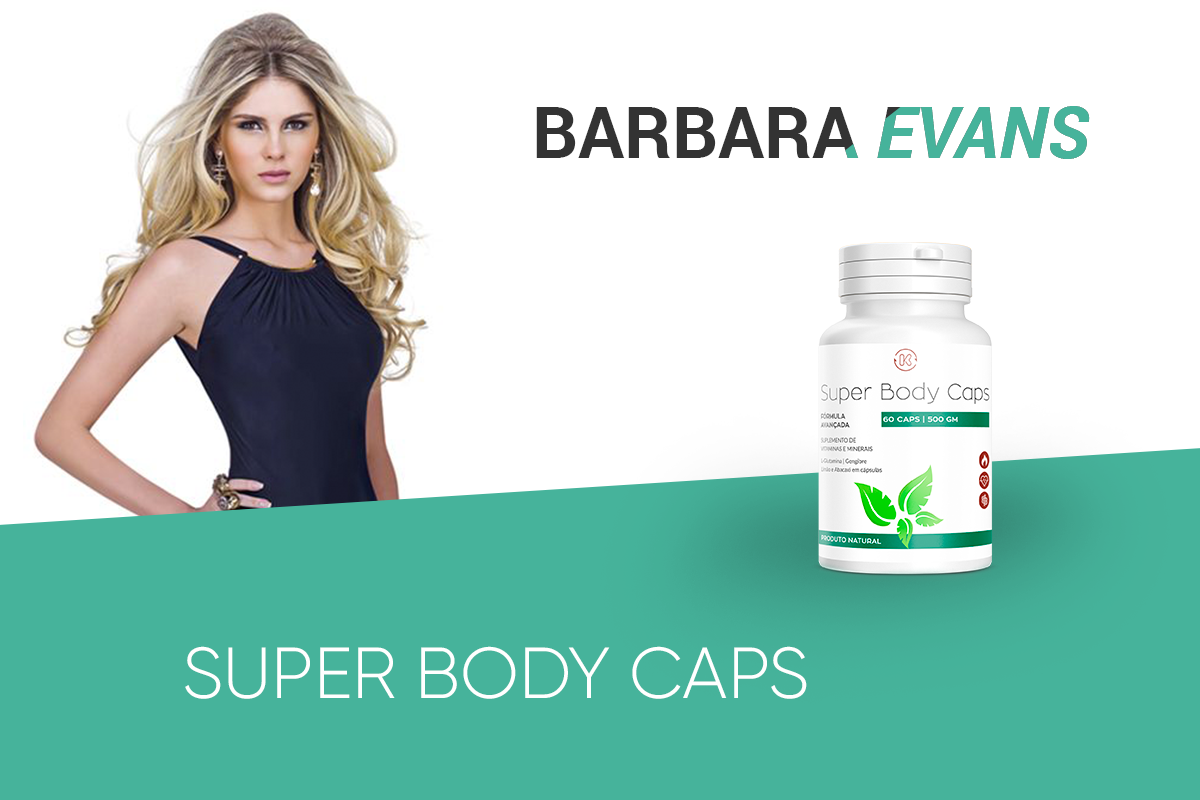
<style>
.page{position:relative;width:1200px;height:800px;background:#ffffff}
.page>*{position:absolute;margin:0}
.t1{font:72px "Roboto-Bold";color:#333333;text-transform:uppercase}
.t2{font:72px "Roboto-BoldItalic";color:#333333;text-transform:uppercase}
.t3{font:72px "Roboto-Bold";text-transform:uppercase}
.t4{font:72px "Roboto-BoldItalic";text-transform:uppercase}
.t5{font:72px "Gilroy-Light";color:#ffffff;text-transform:uppercase}
</style>
<div class="page">
<p class="t1" style="left:536px;top:106px;width:554px;height:53px">Barbara <span class="t2">evans</span></p>
<p class="t3" style="left:536px;top:106px;width:554px;height:53px">Barbara <span class="t4">evans</span></p>
<p class="t5" style="left:185px;top:646px;width:622px;height:53px">Super Body caps</p>
</div>
